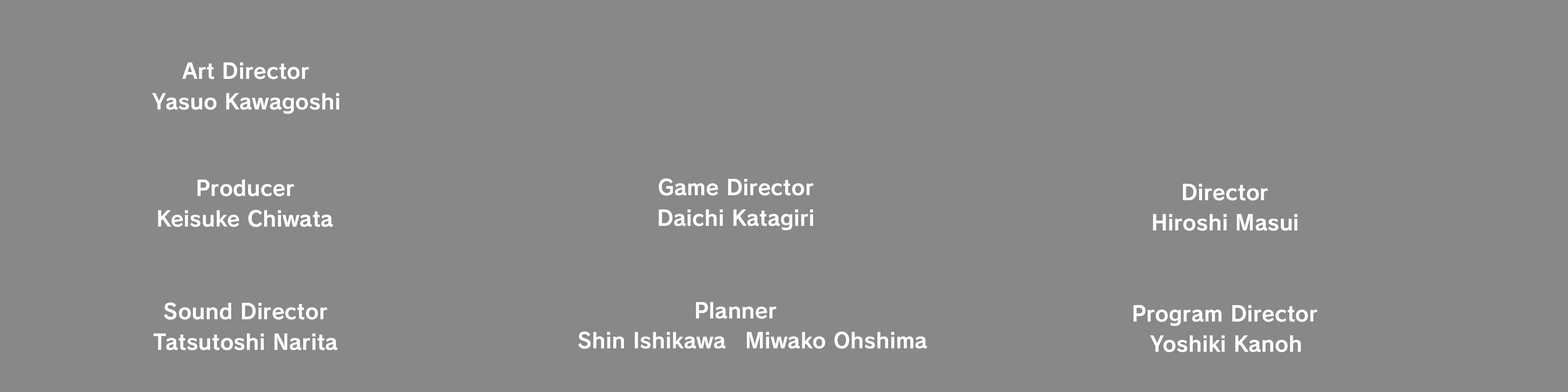
<style>
.page{position:relative;width:1568px;height:392px;background:#888888}
.page>*{position:absolute;margin:0}
.t1{font:21.1px "RodinPro-B";color:#ffffff}
</style>
<div class="page">
<p class="t1" style="left:182px;top:62px;width:127px;height:17px">Art Director</p>
<p class="t1" style="left:152px;top:93px;width:187px;height:21px">Yasuo Kawagoshi</p>
<p class="t1" style="left:198px;top:180px;width:96px;height:16px">Producer</p>
<p class="t1" style="left:658px;top:178px;width:156px;height:18px">Game Director</p>
<p class="t1" style="left:1183px;top:184px;width:85px;height:17px">Director</p>
<p class="t1" style="left:158px;top:210px;width:175px;height:17px">Keisuke Chiwata</p>
<p class="t1" style="left:659px;top:209px;width:154px;height:21px">Daichi Katagiri</p>
<p class="t1" style="left:1153px;top:214px;width:144px;height:17px">Hiroshi Masui</p>
<p class="t1" style="left:164px;top:302px;width:164px;height:18px">Sound Director</p>
<p class="t1" style="left:696px;top:302px;width:81px;height:17px">Planner</p>
<p class="t1" style="left:1134px;top:305px;width:184px;height:21px">Program Director</p>
<p class="t1" style="left:154px;top:333px;width:184px;height:17px">Tatsutoshi Narita</p>
<p class="t1" style="left:1150px;top:335px;width:151px;height:17px">Yoshiki Kanoh</p>
</div>
